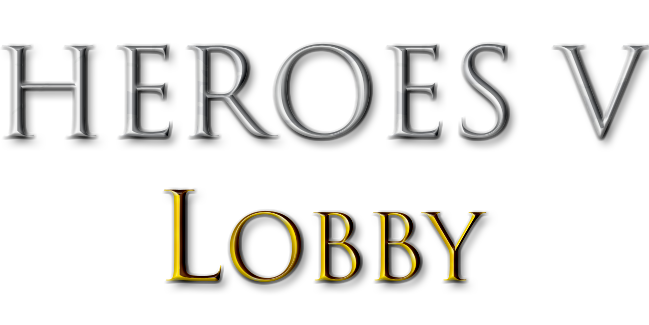
<style>
.page{position:relative;width:649px;height:325px;background:#ffffff}
.page>*{position:absolute;margin:0}
.t1{font:120px "TrajanColor-Concept"}
.t2{font:90px "TrajanColor-Concept"}
</style>
<div class="page">
<p class="t1" style="left:1px;top:43px;width:648px;height:239px;text-align:center">HEROES V<br>L<span class="t2">obby</span></p>
</div>
